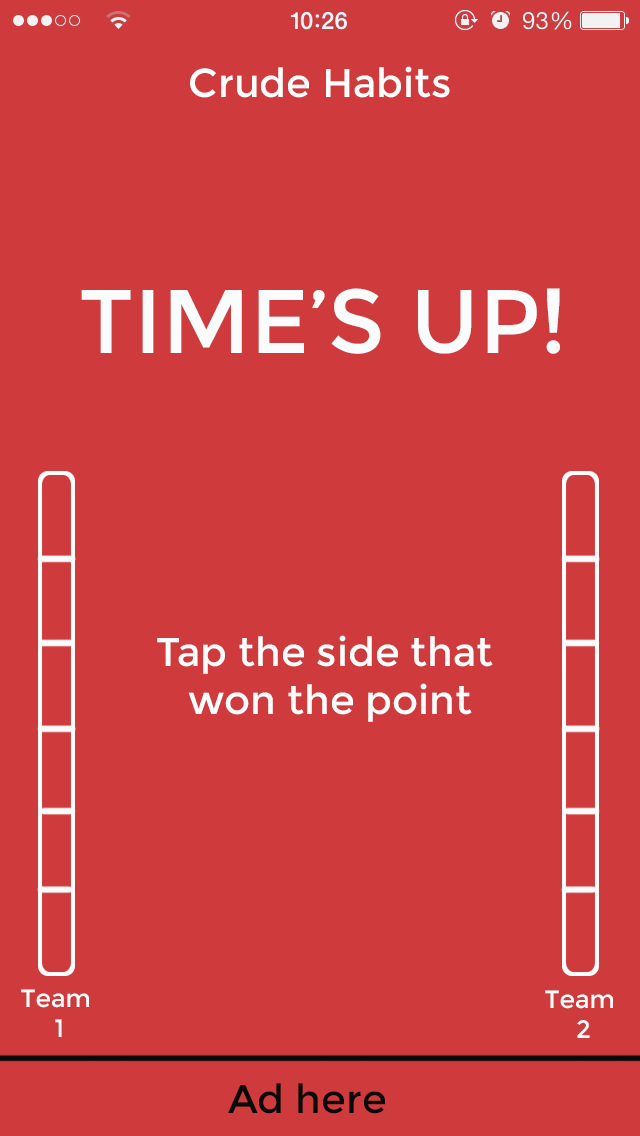
<style>
.page{position:relative;width:640px;height:1136px;background:#cf3b3d}
.page>*{position:absolute;margin:0}
.t1{font:40px "Montserrat-Regular";color:#fdfdfd}
.t2{font:90px "Montserrat-Regular";color:#fafbfc}
.t3{font:25px "Montserrat-Regular";color:#fdfdfd}
.t4{font:40px "Montserrat-Regular";color:#090909}
</style>
<div class="page">
<p class="t1" style="left:190px;top:66px;width:260px;height:32px">Crude Habits</p>
<p class="t2" style="left:81px;top:288px;width:479px;height:66px">TIME’S UP!</p>
<p class="t1" style="left:157px;top:635px;width:336px;height:87px;text-align:center">Tap the side that <br>won the point</p>
<p class="t3" style="left:21px;top:989px;width:68px;height:48px;text-align:center">Team <br>1</p>
<p class="t3" style="left:545px;top:990px;width:68px;height:48px;text-align:center">Team <br>2</p>
<p class="t4" style="left:228px;top:1083px;width:157px;height:31px">Ad here</p>
</div>
